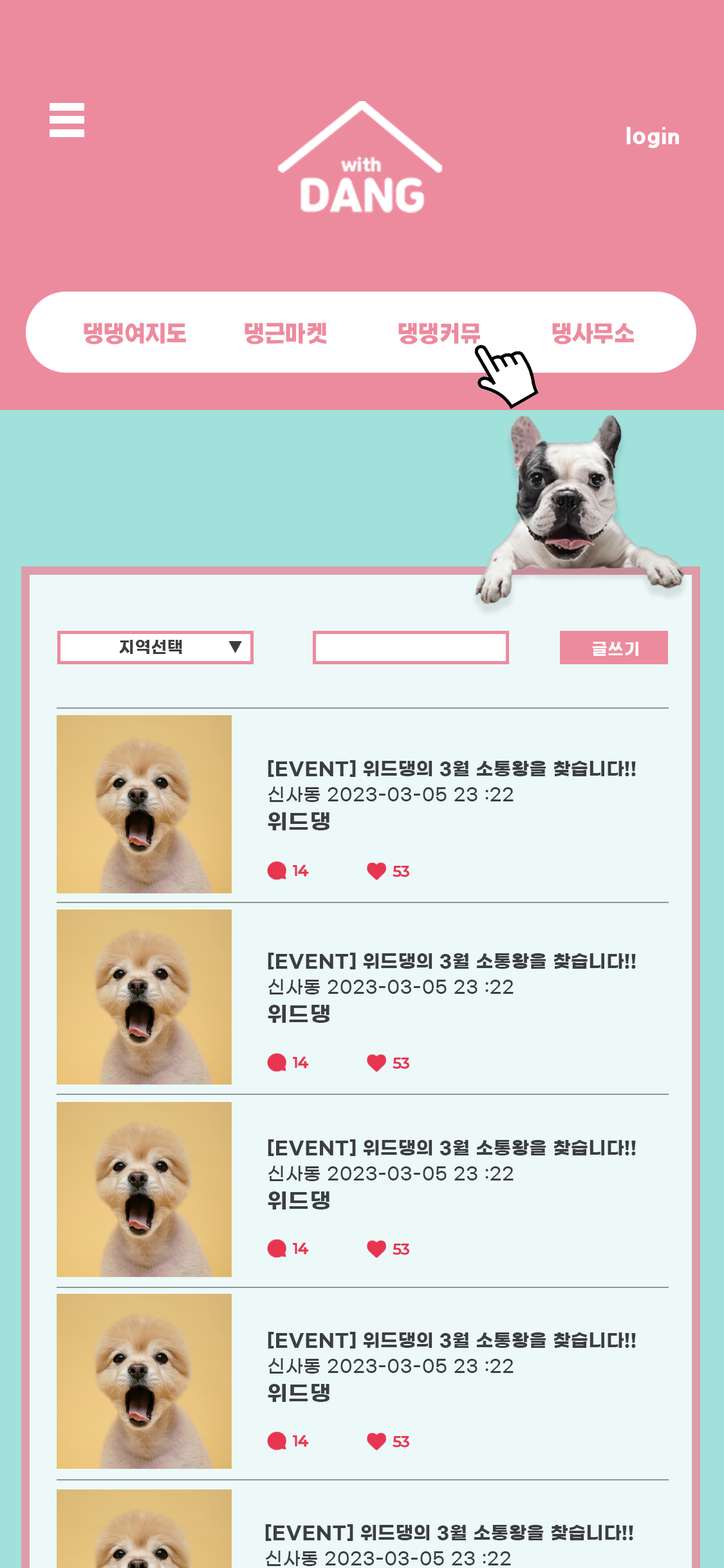
<style>
.page{position:relative;width:724px;height:1568px;background:#ecf9f8}
.page>*{position:absolute;margin:0}
.t1{font:21.2px "KOTRA_BOLD-Bold";color:#ffffff}
.t2{font:21.2px "KOTRA_BOLD-Bold";color:#ed8b9e}
.t3{font:16.2px "GmarketSansTTFBold";letter-spacing:0.04em;color:#3c3e3f}
.t4{font:16.2px "GmarketSansTTFBold";letter-spacing:0.04em;color:#ffffff}
.t5{font:17.8px/25.7px "GmarketSansTTFBold";letter-spacing:0.04em;color:#3c3e3f}
.t6{font:18px/25.7px "GmarketSansTTFMedium";letter-spacing:0.04em;color:#3c3e3f}
.t7{font:21.2px/25.7px "GmarketSansTTFBold";letter-spacing:0.04em;color:#3c3e3f}
</style>
<div class="page">
<p class="t1" style="left:626px;top:127px;width:53px;height:21px">login</p>
<p class="t2" style="left:84px;top:322px;width:102px;height:22px">댕댕여지도</p>
<p class="t2" style="left:245px;top:322px;width:82px;height:22px">댕근마켓</p>
<p class="t2" style="left:398px;top:322px;width:82px;height:22px">댕댕커뮤</p>
<p class="t2" style="left:552px;top:322px;width:82px;height:22px">댕사무소</p>
<p class="t3" style="left:120px;top:640px;width:122px;height:14px">지역선택       ▼</p>
<p class="t4" style="left:592px;top:642px;width:47px;height:14px">글쓰기</p>
<p class="t5" style="left:268px;top:760px;width:368px;height:70px">[EVENT] 위드댕의 3월 소통왕을 찾습니다!!<br><span class="t6">신사동 2023-03-05 23 :22<br></span><span class="t7">위드댕</span></p>
<p class="t5" style="left:268px;top:953px;width:368px;height:70px">[EVENT] 위드댕의 3월 소통왕을 찾습니다!!<br><span class="t6">신사동 2023-03-05 23 :22<br></span><span class="t7">위드댕</span></p>
<p class="t5" style="left:268px;top:1139px;width:368px;height:70px">[EVENT] 위드댕의 3월 소통왕을 찾습니다!!<br><span class="t6">신사동 2023-03-05 23 :22<br></span><span class="t7">위드댕</span></p>
<p class="t5" style="left:268px;top:1332px;width:368px;height:70px">[EVENT] 위드댕의 3월 소통왕을 찾습니다!!<br><span class="t6">신사동 2023-03-05 23 :22<br></span><span class="t7">위드댕</span></p>
</div>
